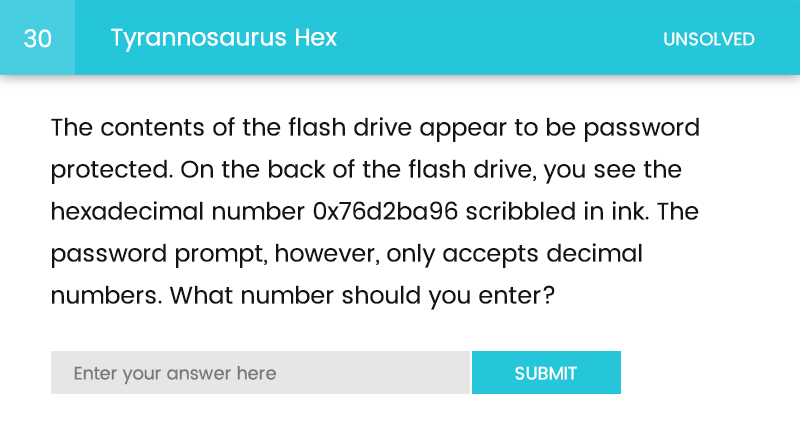
<style>
.page{position:relative;width:800px;height:448px;background:#ffffff}
.page>*{position:absolute;margin:0}
.t1{font:24px "Poppins-Regular";color:#ffffff}
.t2{font:18px "Poppins-Regular";color:#ffffff}
.t3{font:24px/42px "Poppins-Regular";color:#141414}
.t4{font:18px "Poppins-Regular";color:#797979}
</style>
<div class="page">
<p class="t1" style="left:24px;top:29px;width:27px;height:19px">30</p>
<p class="t1" style="left:111px;top:28px;width:226px;height:24px">Tyrannosaurus Hex</p>
<p class="t2" style="left:664px;top:32px;width:91px;height:14px">UNSOLVED</p>
<p class="t3" style="left:51px;top:117px;width:648px;height:193px">The contents of the flash drive appear to be password<br>protected. On the back of the flash drive, you see the<br>hexadecimal number 0x76d2ba96 scribbled in ink. The<br>password prompt, however, only accepts decimal <br>numbers. What number should you enter?</p>
<p class="t4" style="left:74px;top:366px;width:202px;height:19px">Enter your answer here</p>
<p class="t2" style="left:515px;top:366px;width:62px;height:14px">SUBMIT</p>
</div>
